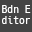
<style>
.page{position:relative;width:32px;height:32px;background:#444444}
.page>*{position:absolute;margin:0}
.t1{font:11px/11px "HackGen-Regular";color:#ffffff}
</style>
<div class="page">
<p class="t1" style="left:2px;top:5px;width:29px;height:19px">Bdn E<br>ditor</p>
</div>
